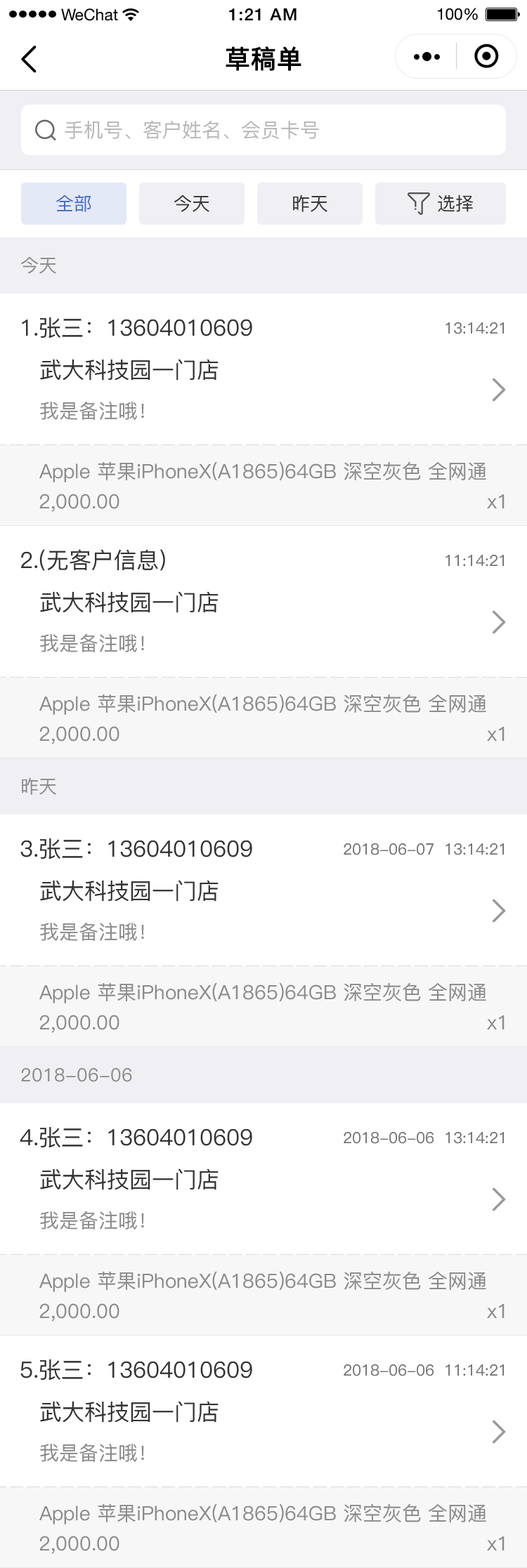
<style>
.page{position:relative;width:527px;height:1568px;background:#ffffff}
.page>*{position:absolute;margin:0}
.t1{font:25.3px "PingFang-SC-Medium";color:#000000;font-weight:bold}
.t2{font:19.7px "PingFang-SC-Medium";color:#b8b8b8}
.t3{font:18.3px "PingFang-SC-Medium";color:#476ec9}
.t4{font:18.3px "PingFang-SC-Medium";color:#333333}
.t5{font:18.3px "PingFang-SC-Medium";color:#8c8c8c}
.t6{font:22.5px "PingFang-SC-Medium";color:#333333}
.t7{font:15.4px "PingFang-SC-Medium";color:#6e6e6e}
.t8{font:19.7px "PingFang-SC-Medium";color:#8c8c8c}
</style>
<div class="page">
<p class="t1" style="left:225px;top:46px;width:76px;height:25px">草稿单</p>
<p class="t2" style="left:65px;top:121px;width:254px;height:18px">手机号、客户姓名、会员卡号</p>
<p class="t3" style="left:56px;top:195px;width:35px;height:17px">全部</p>
<p class="t4" style="left:174px;top:195px;width:35px;height:17px">今天</p>
<p class="t4" style="left:293px;top:195px;width:34px;height:17px">昨天</p>
<p class="t4" style="left:437px;top:195px;width:36px;height:17px">选择</p>
<p class="t5" style="left:21px;top:257px;width:35px;height:17px">今天</p>
<p class="t6" style="left:22px;top:317px;width:230px;height:21px">1.张三：13604010609</p>
<p class="t7" style="left:445px;top:322px;width:58px;height:12px">13:14:21</p>
<p class="t6" style="left:40px;top:359px;width:178px;height:22px">武大科技园一门店</p>
<p class="t8" style="left:40px;top:401px;width:104px;height:19px">我是备注哦！</p>
<p class="t8" style="left:39px;top:461px;width:447px;height:21px">Apple 苹果iPhoneX(A1865)64GB 深空灰色 全网通</p>
<p class="t8" style="left:39px;top:494px;width:80px;height:18px">2,000.00</p>
<p class="t8" style="left:487px;top:494px;width:17px;height:14px">x1</p>
<p class="t6" style="left:21px;top:549px;width:144px;height:22px">2.(无客户信息)</p>
<p class="t7" style="left:445px;top:555px;width:58px;height:11px">11:14:21</p>
<p class="t6" style="left:40px;top:591px;width:178px;height:22px">武大科技园一门店</p>
<p class="t8" style="left:40px;top:633px;width:104px;height:19px">我是备注哦！</p>
<p class="t8" style="left:39px;top:694px;width:447px;height:21px">Apple 苹果iPhoneX(A1865)64GB 深空灰色 全网通</p>
<p class="t8" style="left:39px;top:726px;width:80px;height:18px">2,000.00</p>
<p class="t8" style="left:487px;top:727px;width:17px;height:14px">x1</p>
<p class="t5" style="left:22px;top:777px;width:34px;height:18px">昨天</p>
<p class="t6" style="left:20px;top:838px;width:232px;height:21px">3.张三：13604010609</p>
<p class="t7" style="left:343px;top:843px;width:160px;height:12px">2018-06-07  13:14:21</p>
<p class="t6" style="left:40px;top:880px;width:178px;height:22px">武大科技园一门店</p>
<p class="t8" style="left:40px;top:922px;width:104px;height:19px">我是备注哦！</p>
<p class="t8" style="left:39px;top:982px;width:447px;height:21px">Apple 苹果iPhoneX(A1865)64GB 深空灰色 全网通</p>
<p class="t8" style="left:39px;top:1015px;width:80px;height:18px">2,000.00</p>
<p class="t8" style="left:487px;top:1015px;width:17px;height:14px">x1</p>
<p class="t5" style="left:21px;top:1068px;width:111px;height:14px">2018-06-06</p>
<p class="t6" style="left:20px;top:1126px;width:232px;height:22px">4.张三：13604010609</p>
<p class="t7" style="left:343px;top:1132px;width:160px;height:12px">2018-06-06  13:14:21</p>
<p class="t6" style="left:40px;top:1168px;width:178px;height:22px">武大科技园一门店</p>
<p class="t8" style="left:40px;top:1211px;width:104px;height:19px">我是备注哦！</p>
<p class="t8" style="left:39px;top:1271px;width:447px;height:21px">Apple 苹果iPhoneX(A1865)64GB 深空灰色 全网通</p>
<p class="t8" style="left:39px;top:1303px;width:80px;height:19px">2,000.00</p>
<p class="t8" style="left:487px;top:1304px;width:17px;height:14px">x1</p>
<p class="t6" style="left:20px;top:1359px;width:232px;height:22px">5.张三：13604010609</p>
<p class="t7" style="left:343px;top:1364px;width:160px;height:12px">2018-06-06  11:14:21</p>
<p class="t6" style="left:40px;top:1401px;width:178px;height:22px">武大科技园一门店</p>
<p class="t8" style="left:40px;top:1443px;width:104px;height:19px">我是备注哦！</p>
<p class="t8" style="left:39px;top:1503px;width:447px;height:21px">Apple 苹果iPhoneX(A1865)64GB 深空灰色 全网通</p>
<p class="t8" style="left:39px;top:1536px;width:80px;height:18px">2,000.00</p>
<p class="t8" style="left:487px;top:1536px;width:17px;height:14px">x1</p>
</div>
